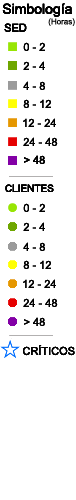
<style>
.page{position:relative;width:76px;height:500px;background:#ffffff}
.page>*{position:absolute;margin:0}
.t1{font:8px "ArialMT";color:#000000}
.t2{font:11px "ArialMT";color:#000000}
</style>
<div class="page">
<p class="t1" style="left:48px;top:18px;width:27px;height:8px">(Horas)</p>
<p class="t2" style="left:23px;top:42px;width:22px;height:9px">0 - 2</p>
<p class="t2" style="left:23px;top:42px;width:22px;height:9px">0 - 2</p>
<p class="t2" style="left:23px;top:61px;width:22px;height:9px">2 - 4</p>
<p class="t2" style="left:23px;top:61px;width:22px;height:9px">2 - 4</p>
<p class="t2" style="left:23px;top:81px;width:22px;height:9px">4 - 8</p>
<p class="t2" style="left:23px;top:81px;width:22px;height:9px">4 - 8</p>
<p class="t2" style="left:23px;top:99px;width:28px;height:9px">8 - 12</p>
<p class="t2" style="left:23px;top:99px;width:28px;height:9px">8 - 12</p>
<p class="t2" style="left:23px;top:118px;width:33px;height:9px">12 - 24</p>
<p class="t2" style="left:23px;top:118px;width:33px;height:9px">12 - 24</p>
<p class="t2" style="left:23px;top:137px;width:35px;height:9px">24 - 48</p>
<p class="t2" style="left:23px;top:137px;width:35px;height:9px">24 - 48</p>
<p class="t2" style="left:24px;top:155px;width:21px;height:9px">&gt; 48</p>
<p class="t2" style="left:24px;top:155px;width:21px;height:9px">&gt; 48</p>
<p class="t2" style="left:24px;top:155px;width:21px;height:9px">&gt; 48</p>
<p class="t2" style="left:23px;top:203px;width:22px;height:9px">0 - 2</p>
<p class="t2" style="left:23px;top:203px;width:22px;height:9px">0 - 2</p>
<p class="t2" style="left:23px;top:222px;width:22px;height:9px">2 - 4</p>
<p class="t2" style="left:23px;top:222px;width:22px;height:9px">2 - 4</p>
<p class="t2" style="left:23px;top:242px;width:22px;height:9px">4 - 8</p>
<p class="t2" style="left:23px;top:242px;width:22px;height:9px">4 - 8</p>
<p class="t2" style="left:23px;top:260px;width:28px;height:9px">8 - 12</p>
<p class="t2" style="left:23px;top:260px;width:28px;height:9px">8 - 12</p>
<p class="t2" style="left:23px;top:279px;width:33px;height:9px">12 - 24</p>
<p class="t2" style="left:23px;top:279px;width:33px;height:9px">12 - 24</p>
<p class="t2" style="left:23px;top:298px;width:35px;height:9px">24 - 48</p>
<p class="t2" style="left:23px;top:298px;width:35px;height:9px">24 - 48</p>
<p class="t2" style="left:24px;top:317px;width:21px;height:9px">&gt; 48</p>
<p class="t2" style="left:24px;top:317px;width:21px;height:9px">&gt; 48</p>
</div>
